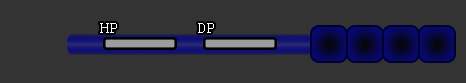
<style>
.page{position:relative;width:466px;height:83px;background:#333333}
.page>*{position:absolute;margin:0}
.t1{font:16px "Courier";color:#ffffff}
</style>
<div class="page">
<p class="t1" style="left:100px;top:23px;width:17px;height:10px">HP</p>
<p class="t1" style="left:198px;top:23px;width:16px;height:10px">DP</p>
</div>
